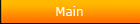
<style>
.page{position:relative;width:140px;height:24px}
.page>*{position:absolute;margin:0}
.t1{font:12px "Verdana";color:#ffffff}
</style>
<div class="page">
<p class="t1" style="left:56px;top:6px;width:27px;height:10px">Main</p>
</div>
